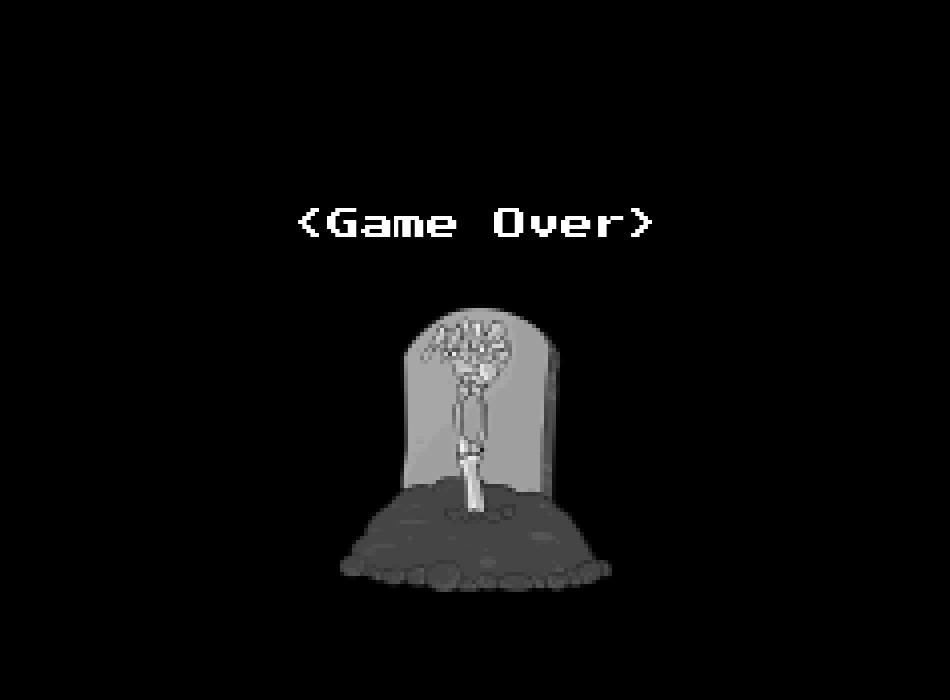
<style>
.page{position:relative;width:950px;height:700px;background:#000000}
.page>*{position:absolute;margin:0}
.t1{font:33.3px "PressStart2P-Regular";color:#ffffff}
</style>
<div class="page">
<p class="t1" style="left:298px;top:208px;width:354px;height:29px">&lt;Game Over&gt;</p>
</div>
